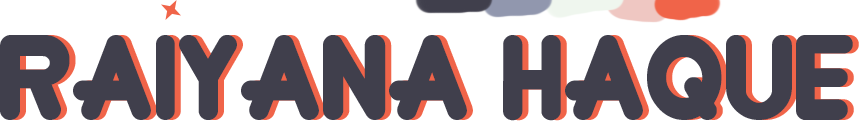
<style>
.page{position:relative;width:859px;height:121px;background:#ffffff}
.page>*{position:absolute;margin:0}
.t1{font:85px "Crewniverse";color:#403f4c}
</style>
<div class="page">
<p class="t1" style="left:0px;top:35px;width:853px;height:86px">Raiyana Haque</p>
<p class="t1" style="left:6px;top:35px;width:853px;height:86px">Raiyana Haque</p>
</div>
